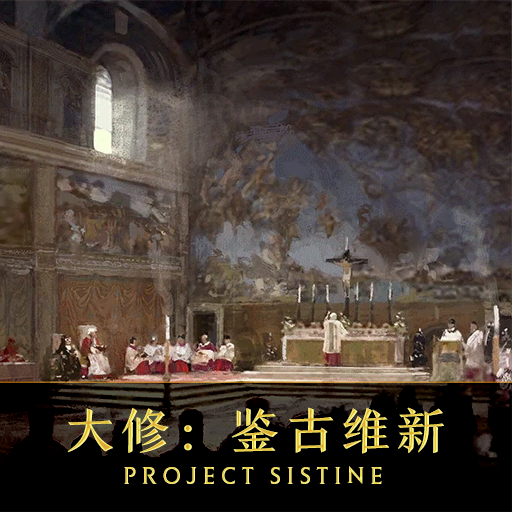
<style>
.page{position:relative;width:512px;height:512px}
.page>*{position:absolute;margin:0}
.t1{font:48px "FZYANS_ZHUNJW--GB1-0";letter-spacing:0.15em}
.t2{font:24px "ElanITCStd-Book";letter-spacing:0.255em}
</style>
<div class="page">
<p class="t1" style="left:67px;top:407px;width:377px;height:47px">大修：鉴古维新</p>
<p class="t2" style="left:124px;top:466px;width:258px;height:18px">PROJECT SISTINE</p>
</div>
